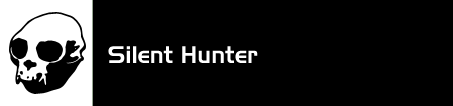
<style>
.page{position:relative;width:453px;height:106px;background:#000000}
.page>*{position:absolute;margin:0}
.t1{font:24px "Slicker";color:#ffffff}
</style>
<div class="page">
<p class="t1" style="left:108px;top:46px;width:150px;height:17px">Silent Hunter</p>
</div>
